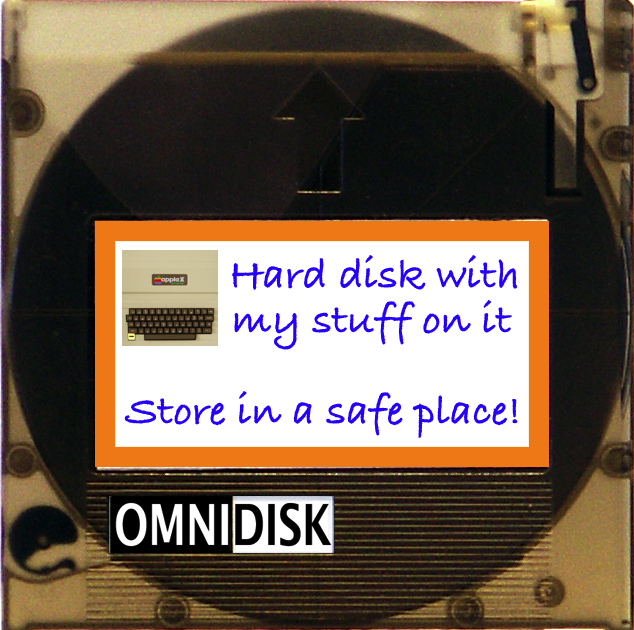
<style>
.page{position:relative;width:634px;height:630px}
.page>*{position:absolute;margin:0}
.t1{font:44px "BradleyHandITCTTBold";color:#2400ff}
</style>
<div class="page">
<p class="t1" style="left:232px;top:255px;width:285px;height:35px">Hard disk with</p>
<p class="t1" style="left:234px;top:300px;width:278px;height:50px">my stuff on it</p>
<p class="t1" style="left:124px;top:391px;width:394px;height:47px">Store in a safe place!</p>
</div>
